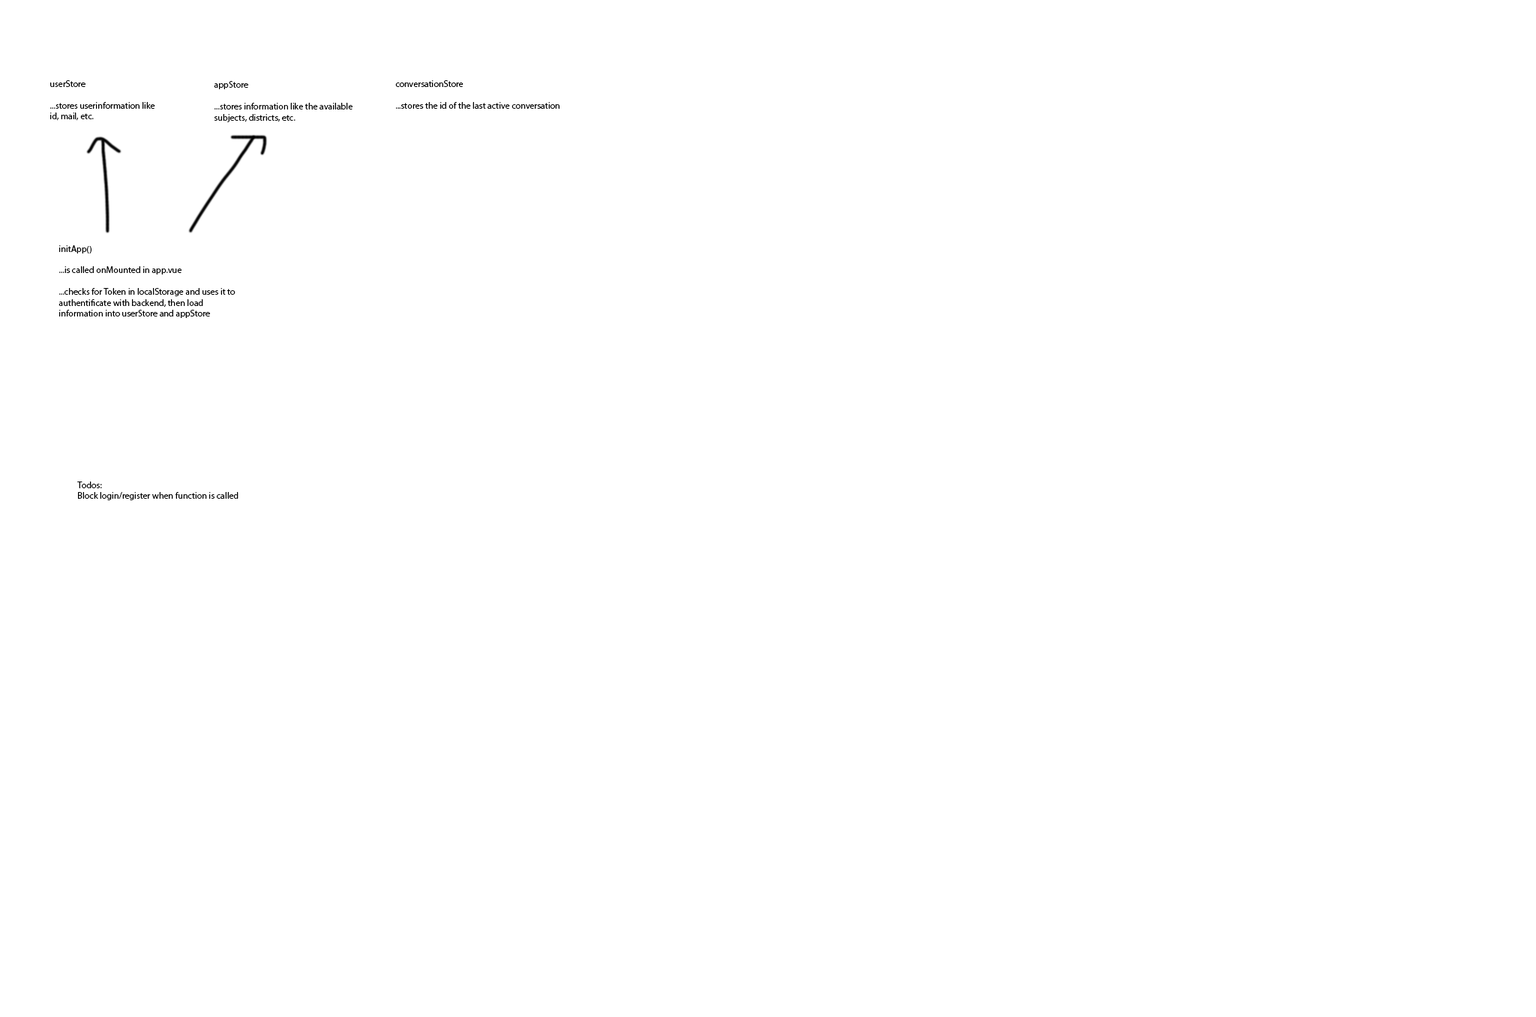
<style>
.page{position:relative;width:1536px;height:1017px;background:#ffffff}
.page>*{position:absolute;margin:0}
.t1{font:9px "MyriadPro-Regular";color:#000000}
</style>
<div class="page">
<p class="t1" style="left:50px;top:80px;width:105px;height:41px">userStore<br><br>...stores userinformation like<br>id, mail, etc.</p>
<p class="t1" style="left:214px;top:81px;width:138px;height:41px">appStore<br><br>...stores information like the available<br>subjects, districts, etc.</p>
<p class="t1" style="left:395px;top:80px;width:165px;height:29px">conversationStore<br><br>...stores the id of the last active conversation</p>
<p class="t1" style="left:58px;top:245px;width:178px;height:73px">initApp()<br><br>...is called onMounted in app.vue<br><br>...checks for Token in localStorage and uses it to<br>authentificate with backend, then load<br>information into userStore and appStore</p>
<p class="t1" style="left:77px;top:482px;width:161px;height:18px">Todos:<br>Block login/register when function is called</p>
</div>
